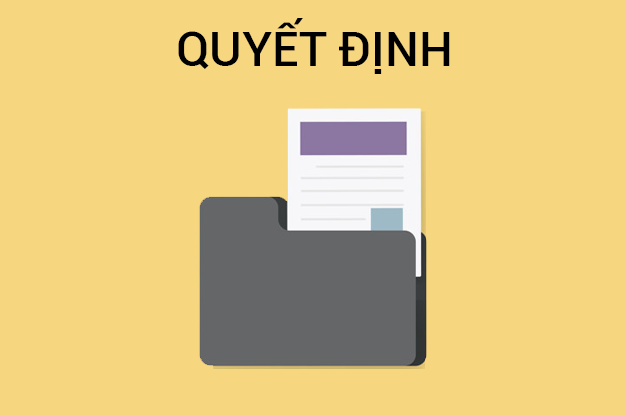
<style>
.page{position:relative;width:626px;height:416px;background:#f6d67f}
.page>*{position:absolute;margin:0}
.t1{font:48px "Roboto-Medium";color:#000000}
</style>
<div class="page">
<p class="t1" style="left:178px;top:18px;width:272px;height:56px">QUYẾT ĐỊNH</p>
</div>
